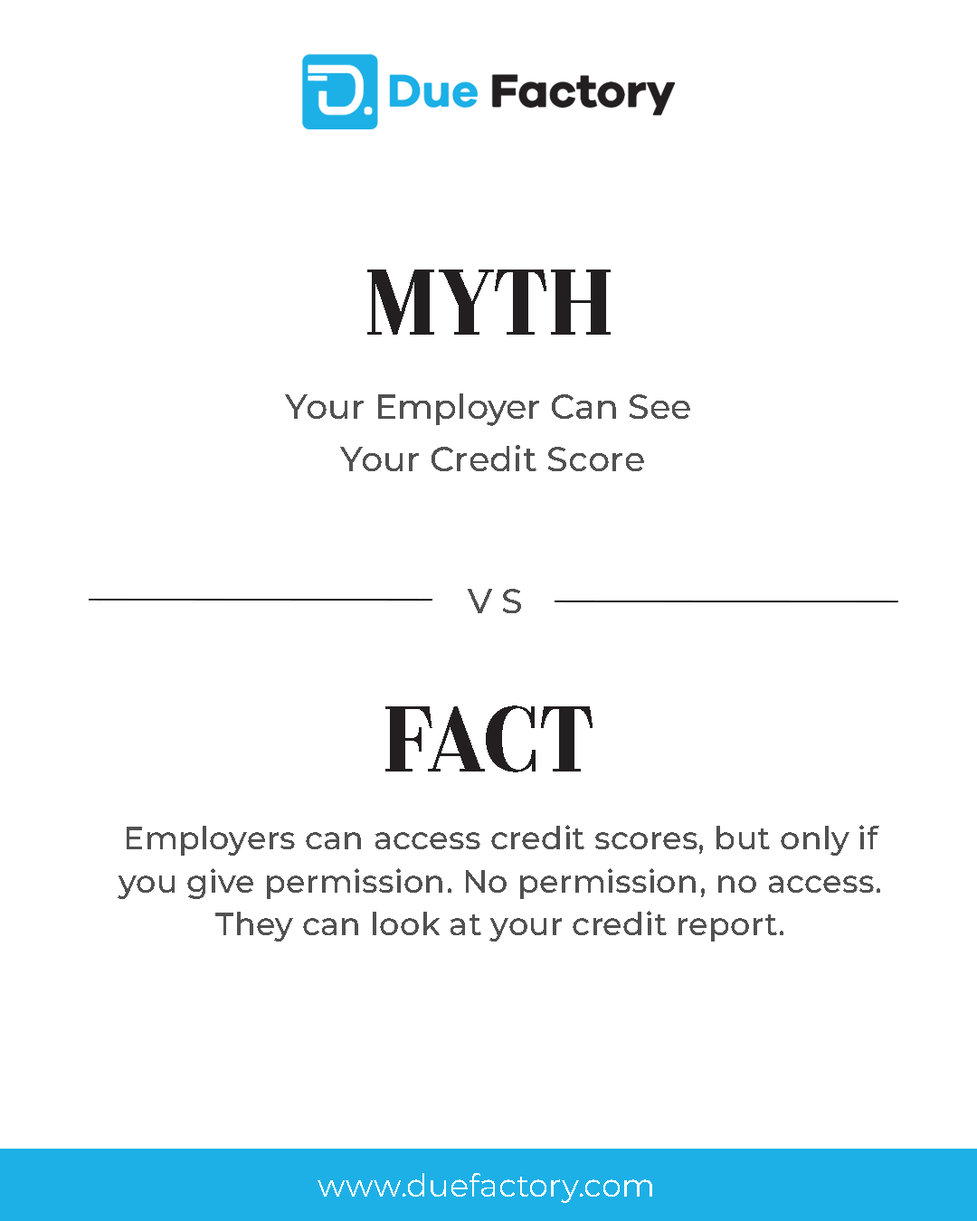
<style>
.page{position:relative;width:977px;height:1221px;background:#ffffff}
.page>*{position:absolute;margin:0}
.t1{font:81px "Couturier-SemiBold";color:#231f20}
.t2{font:33.9px/52.9px "Montserrat-Medium";color:#515151}
.t3{font:33.9px "Montserrat-Medium";color:#515151}
.t4{font:32px/43.1px "Montserrat-Medium";color:#515151}
.t5{font:32px "Montserrat-Regular";color:#ffffff}
</style>
<div class="page">
<p class="t1" style="left:367px;top:269px;width:243px;height:66px">MYTH</p>
<p class="t2" style="left:285px;top:393px;width:405px;height:78px;text-align:center">Your Employer Can See <br>Your Credit Score</p>
<p class="t3" style="left:468px;top:589px;width:53px;height:24px">V S</p>
<p class="t1" style="left:385px;top:705px;width:207px;height:67px">FACT</p>
<p class="t4" style="left:118px;top:825px;width:762px;height:116px;text-align:center">Employers can access credit scores, but only if you give permission. No permission, no access. They can look at your credit report.</p>
<p class="t5" style="left:317px;top:1173px;width:335px;height:30px">www.duefactory.com</p>
</div>
